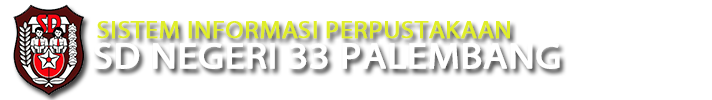
<style>
.page{position:relative;width:712px;height:100px;background:#ffffff}
.page>*{position:absolute;margin:0}
.t1{font:24px "MyriadPro-Regular";color:#e0ee29;font-weight:bold;scale:1.1 1}
.t2{font:36px "MyriadPro-Regular";color:#ffffff;font-weight:bold;scale:1.1 1}
</style>
<div class="page">
<p class="t1" style="left:97px;top:21px;width:413px;height:18px">SISTEM INFORMASI PERPUSTAKAAN</p>
<p class="t2" style="left:94px;top:42px;width:466px;height:27px">SD NEGERI 33 PALEMBANG</p>
</div>
